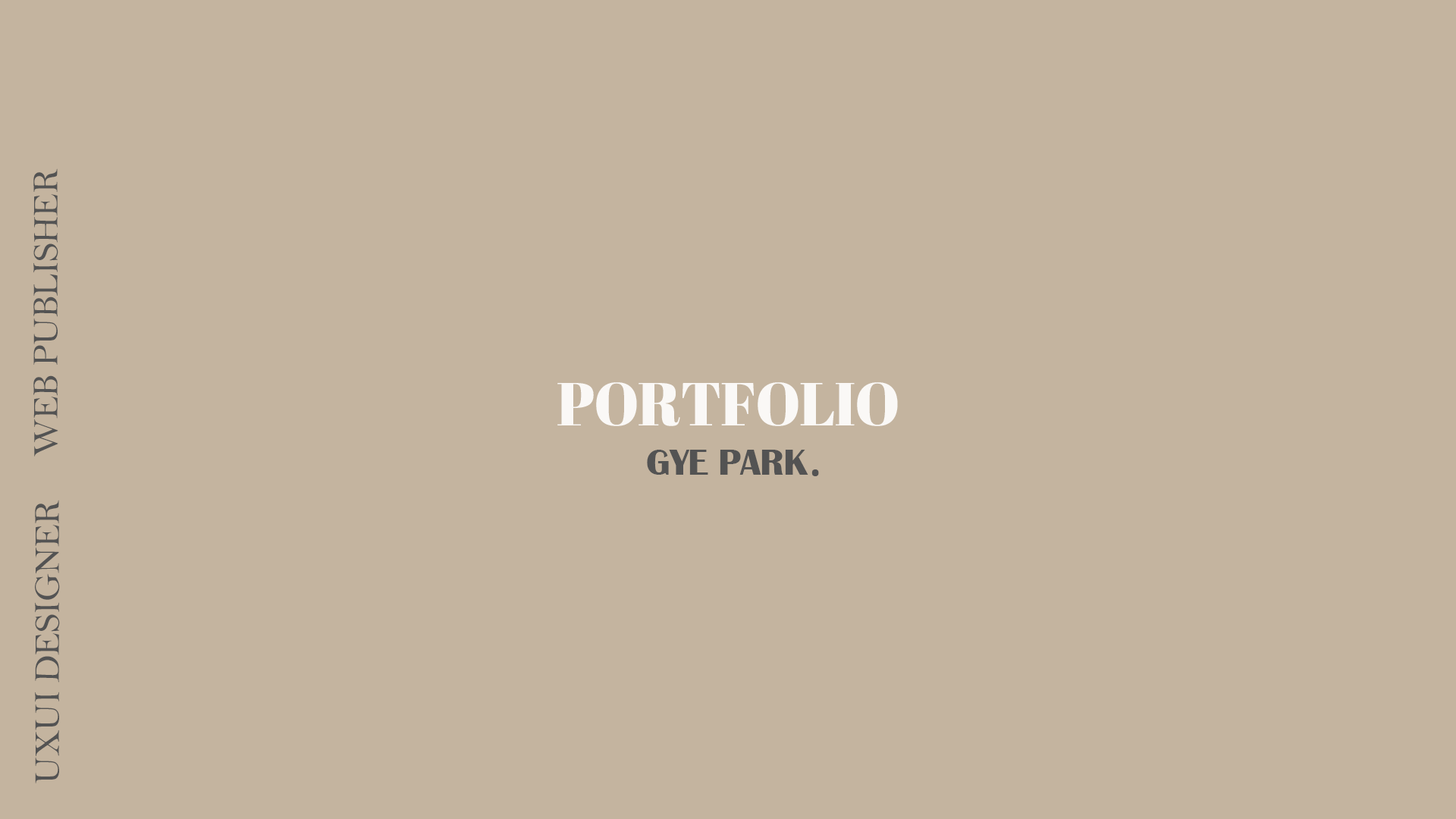
<style>
.page{position:relative;width:1456px;height:819px;background:#c4b49f}
.page>*{position:absolute;margin:0}
.t1{font:36.4px "BellMT";letter-spacing:-0.02em;color:#535353;text-transform:uppercase}
.t2{font:60.7px "AbrilFatface-Regular";letter-spacing:-0.02em;color:#faf8f6;text-transform:uppercase}
.t3{font:37.9px "BritannicBold";letter-spacing:-0.02em;color:#535353;text-transform:uppercase}
</style>
<div class="page">
<p class="t1" style="left:33px;top:168px;width:25px;height:289px;rotate:-90deg">WEB PUBLISHER</p>
<p class="t2" style="left:557px;top:382px;width:341px;height:44px">PORTFOLIO</p>
<p class="t3" style="left:647px;top:450px;width:161px;height:25px">GYE PARK</p>
<p class="t3" style="left:811px;top:469px;width:8px;height:7px">.</p>
<p class="t1" style="left:35px;top:500px;width:25px;height:283px;rotate:-90deg">UXUI DESIGNER</p>
</div>
